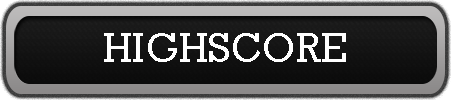
<style>
.page{position:relative;width:451px;height:100px}
.page>*{position:absolute;margin:0}
.t1{font:41.7px "Rockwell";color:#ffffff}
</style>
<div class="page">
<p class="t1" style="left:104px;top:33px;width:242px;height:29px">HIGHSCORE</p>
</div>
